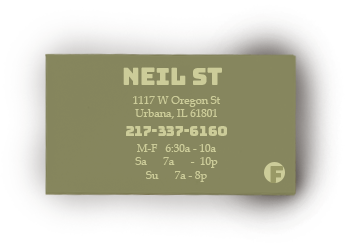
<style>
.page{position:relative;width:347px;height:243px}
.page>*{position:absolute;margin:0}
.t1{font:24px "Bungee-Regular";color:#cccc99}
.t2{font:11px "BookAntiqua";color:#cccc99}
.t3{font:11px/24px "BookAntiqua";color:#cccc99}
.t4{font:14px/19px "Bungee-Regular";color:#cccc99}
.t5{font:11px/16px "BookAntiqua";color:#cccc99}
.t6{font:24px "Bungee-Regular";color:#999966}
</style>
<div class="page">
<p class="t1" style="left:123px;top:67px;width:99px;height:18px">neil st</p>
<p class="t2" style="left:126px;top:96px;width:101px;height:86px;text-align:center"><span class="t3">1117 W Oregon St<br></span>Urbana, IL 61801<br><span class="t4">217-337-6160<br></span><span class="t5">M-F   6:30a - 10a<br></span>Sa      7a      -  10p<br>Su      7a - 8p</p>
<p class="t6" style="left:270px;top:166px;width:13px;height:17px">f</p>
</div>
